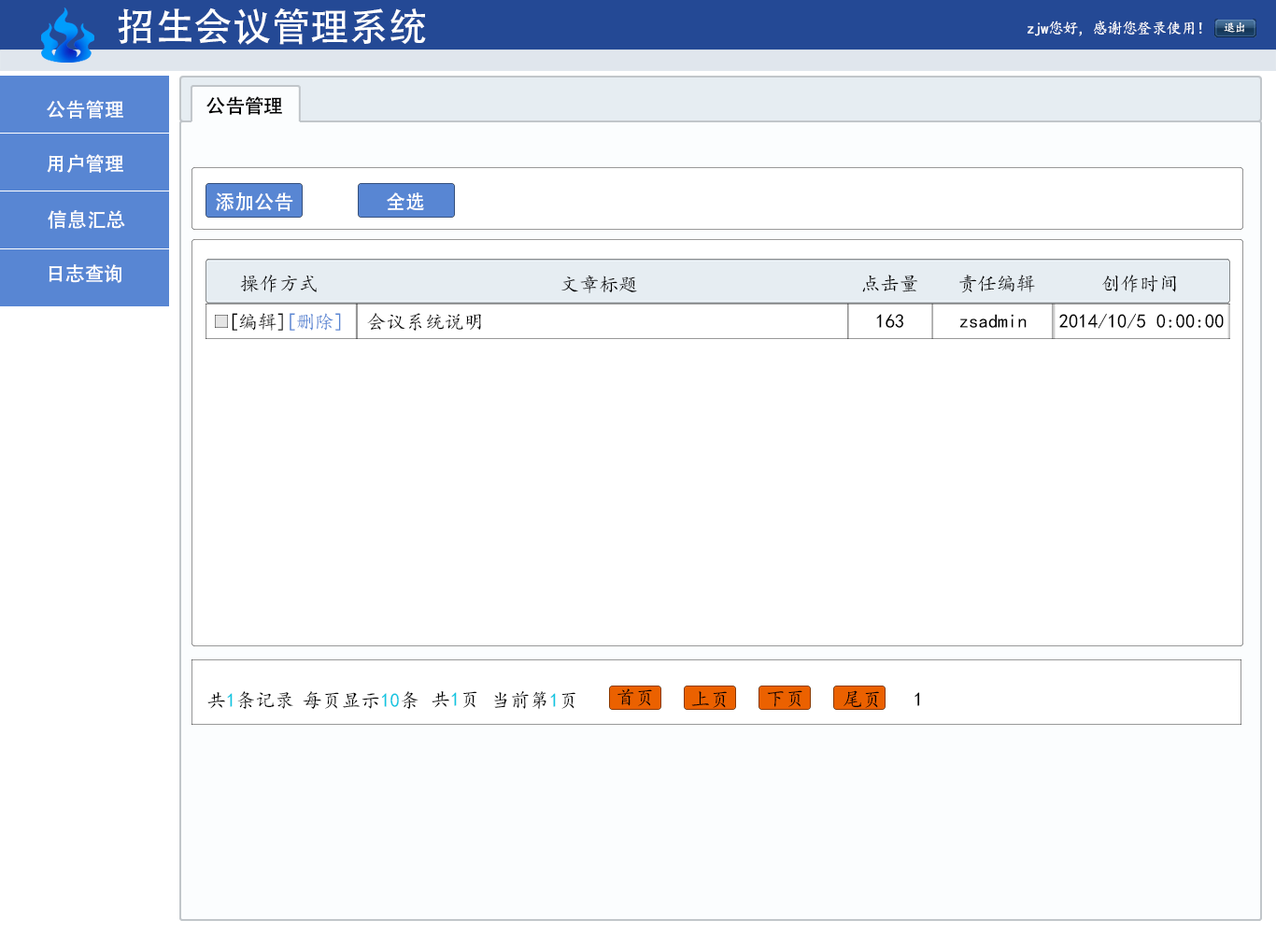
<style>
.page{position:relative;width:1276px;height:934px;background:#ffffff}
.page>*{position:absolute;margin:0}
.t1{font:38.9px "AdobeHeitiStd-Regular";color:#ffffff}
.t2{font:15.6px "KaiTi";letter-spacing:-0.05em;color:#ffffff}
.t3{font:11.7px "KaiTi";letter-spacing:-0.05em;color:#ffffff}
.t4{font:19.5px "AdobeHeitiStd-Regular";color:#fefefe}
.t5{font:19.5px "AdobeHeitiStd-Regular";color:#000000}
.t6{font:19.5px "AdobeHeitiStd-Regular";color:#ffffff}
.t7{font:19.5px "KaiTi";color:#000000}
.t8{font:19.5px "KaiTi";color:#5886d3}
.t9{font:19.5px "KaiTi";color:#10c6e1}
</style>
<div class="page">
<p class="t1" style="left:118px;top:7px;width:308px;height:38px">招生会议管理系统</p>
<p class="t2" style="left:1028px;top:21px;width:174px;height:15px">zjw您好，感谢您登录使用！</p>
<p class="t3" style="left:1224px;top:22px;width:21px;height:11px">退出</p>
<p class="t4" style="left:47px;top:100px;width:76px;height:19px">公告管理</p>
<p class="t5" style="left:206px;top:96px;width:76px;height:19px">公告管理</p>
<p class="t4" style="left:47px;top:154px;width:76px;height:19px">用户管理</p>
<p class="t6" style="left:216px;top:192px;width:77px;height:19px">添加公告</p>
<p class="t6" style="left:387px;top:192px;width:37px;height:18px">全选</p>
<p class="t4" style="left:48px;top:210px;width:77px;height:19px">信息汇总</p>
<p class="t4" style="left:49px;top:264px;width:72px;height:19px">日志查询</p>
<p class="t7" style="left:240px;top:275px;width:77px;height:17px">操作方式</p>
<p class="t7" style="left:562px;top:275px;width:75px;height:18px">文章标题</p>
<p class="t7" style="left:862px;top:275px;width:56px;height:17px">点击量</p>
<p class="t7" style="left:960px;top:275px;width:75px;height:18px">责任编辑</p>
<p class="t7" style="left:1102px;top:275px;width:74px;height:17px">创作时间</p>
<p class="t7" style="left:232px;top:313px;width:51px;height:18px">[编辑]</p>
<p class="t8" style="left:290px;top:313px;width:51px;height:18px">[删除]</p>
<p class="t7" style="left:367px;top:313px;width:114px;height:18px">会议系统说明</p>
<p class="t7" style="left:876px;top:314px;width:28px;height:14px">163</p>
<p class="t7" style="left:960px;top:314px;width:67px;height:14px">zsadmin</p>
<p class="t7" style="left:1060px;top:313px;width:164px;height:16px">2014/10/5 0:00:00</p>
<p class="t7" style="left:618px;top:689px;width:34px;height:17px">首页</p>
<p class="t7" style="left:207px;top:691px;width:86px;height:18px">共<span class="t9">1</span>条记录</p>
<p class="t7" style="left:303px;top:691px;width:116px;height:18px">每页显示<span class="t9">10</span>条</p>
<p class="t7" style="left:432px;top:691px;width:45px;height:17px">共<span class="t9">1</span>页</p>
<p class="t7" style="left:494px;top:691px;width:82px;height:18px">当前第<span class="t9">1</span>页</p>
<p class="t7" style="left:691px;top:691px;width:36px;height:17px">上页</p>
<p class="t7" style="left:767px;top:690px;width:36px;height:17px">下页</p>
<p class="t7" style="left:844px;top:690px;width:35px;height:18px">尾页</p>
<p class="t7" style="left:915px;top:692px;width:5px;height:14px">1</p>
</div>
